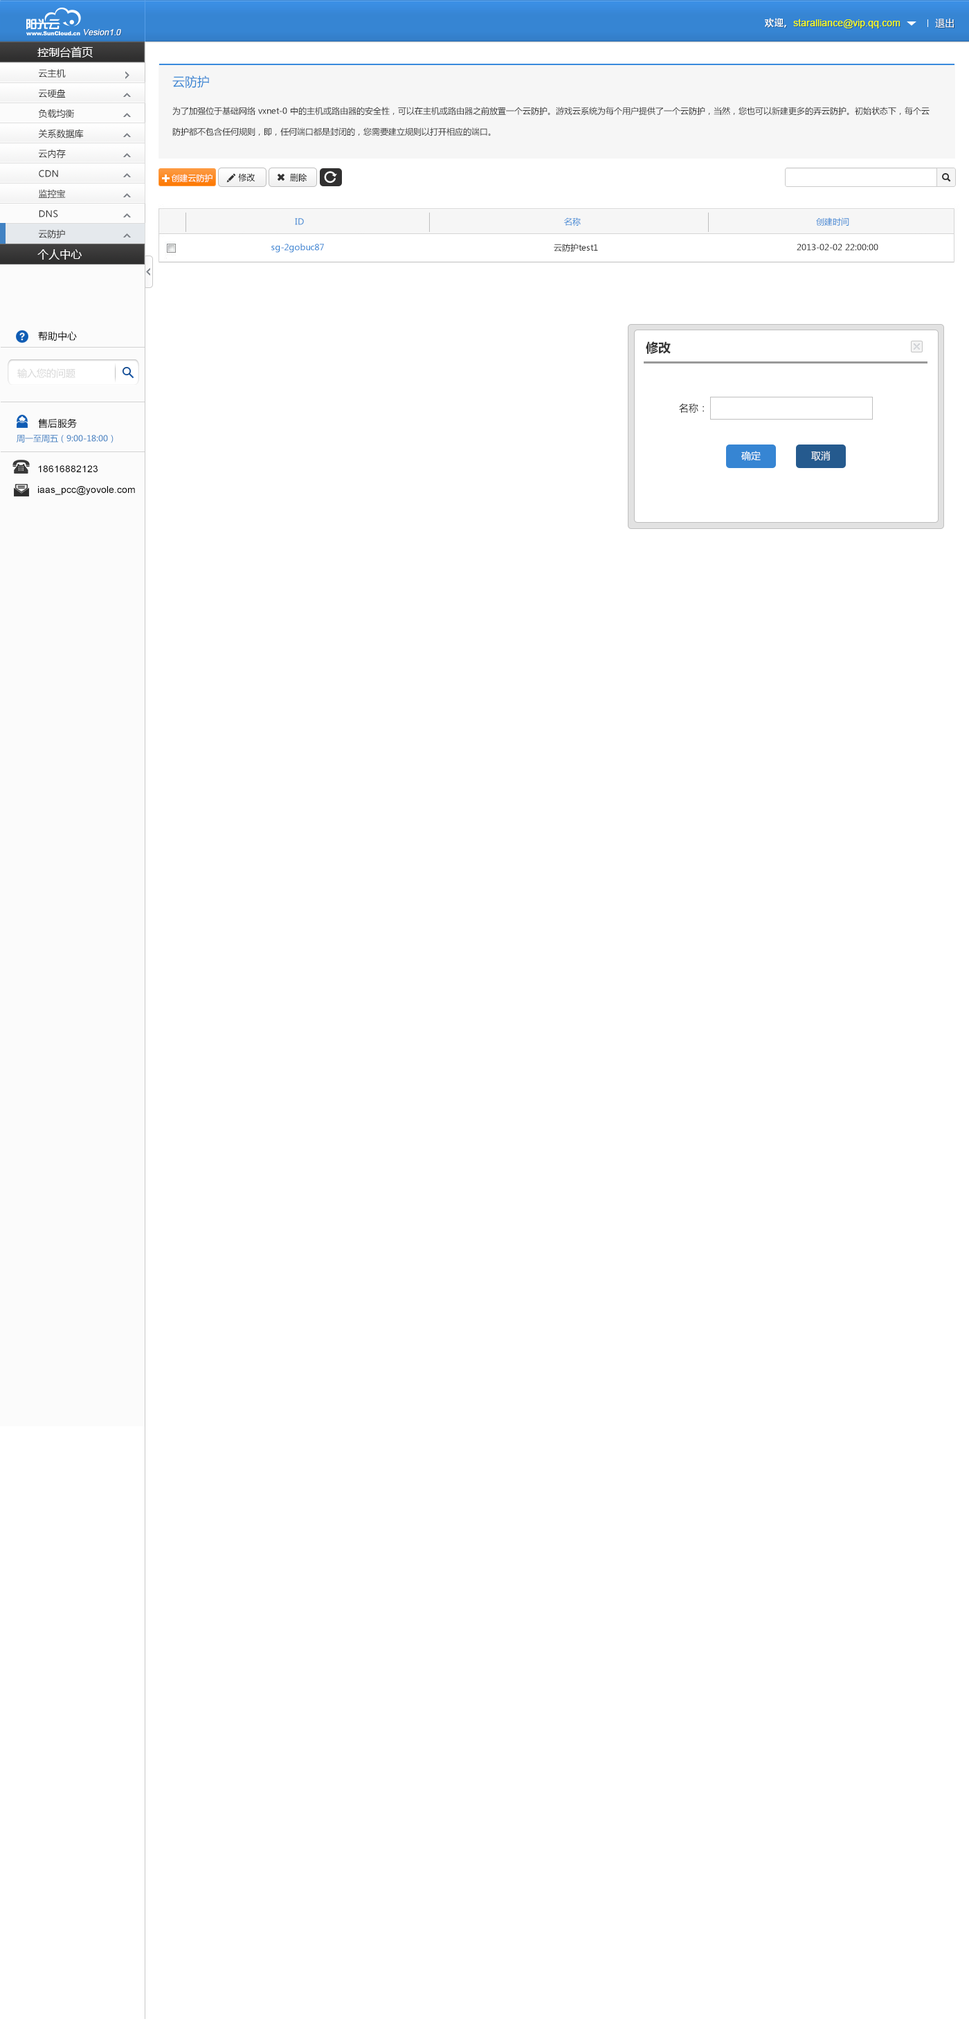
<style>
.page{position:relative;width:969px;height:2037px;background:#ffffff}
.page>*{position:absolute;margin:0}
.t1{font:8.3px "ArialMT";color:#ffffff;font-style:italic}
.t2{font:9.7px "ArialMT";color:#fcff0e}
.t3{font:9.7px "AdobeHeitiStd-Regular";color:#ffffff}
.t4{font:9.7px "MicrosoftYaHei";color:#ffffff}
.t5{font:11.1px "MicrosoftYaHei";color:#ffffff}
.t6{font:9px "MicrosoftYaHei";color:#333333}
.t7{font:12.5px "MicrosoftYaHei";color:#3685d3}
.t8{font:8.3px/20.8px "MicrosoftYaHei";color:#333333}
.t9{font:8.3px "MicrosoftYaHei";color:#fefefe}
.t10{font:8.3px "MicrosoftYaHei";color:#000000}
.t11{font:8.3px "MicrosoftYaHei";color:#3685d3}
.t12{font:8.3px "MicrosoftYaHei";color:#333333}
.t13{font:9.7px "MicrosoftYaHei";color:#000000}
.t14{font:12.5px "MicrosoftYaHei-Bold";color:#333333}
.t15{font:9.7px "MicrosoftYaHei";color:#d7d7d7}
.t16{font:9.7px "MicrosoftYaHei";color:#333333}
.t17{font:8.3px "MicrosoftYaHei";color:#4182c3}
.t18{font:9.7px/6.9px "ArialMT";color:#000000}
</style>
<div class="page">
<p class="t1" style="left:84px;top:29px;width:37px;height:6px">Vesion1.0</p>
<p class="t2" style="left:765px;top:18px;width:136px;height:10px"><span class="t3">欢迎，</span>staralliance@vip.qq.com</p>
<p class="t4" style="left:935px;top:18px;width:19px;height:10px">退出</p>
<p class="t5" style="left:37px;top:46px;width:56px;height:12px">控制台首页</p>
<p class="t6" style="left:38px;top:69px;width:28px;height:9px">云主机</p>
<p class="t7" style="left:172px;top:75px;width:37px;height:14px">云防护</p>
<p class="t6" style="left:38px;top:89px;width:28px;height:9px">云硬盘</p>
<p class="t6" style="left:38px;top:109px;width:36px;height:9px">负载均衡</p>
<p class="t8" style="left:172px;top:107px;width:758px;height:29px">为了加强位于基础网络 vxnet-0 中的主机或路由器的安全性，可以在主机或路由器之前放置一个云防护。游戏云系统为每个用户提供了一个云防护，当然，您也可以新建更多的弄云防护。初始状态下，每个云防护都不包含任何规则，即，任何端口都是封闭的，您需要建立规则以打开相应的端口。</p>
<p class="t6" style="left:38px;top:129px;width:46px;height:9px">关系数据库</p>
<p class="t6" style="left:38px;top:149px;width:28px;height:10px">云内存</p>
<p class="t6" style="left:39px;top:170px;width:19px;height:7px">CDN</p>
<p class="t9" style="left:171px;top:174px;width:42px;height:9px">创建云防护</p>
<p class="t10" style="left:238px;top:173px;width:17px;height:9px">修改</p>
<p class="t10" style="left:290px;top:173px;width:17px;height:9px">删除</p>
<p class="t6" style="left:38px;top:189px;width:28px;height:9px">监控宝</p>
<p class="t6" style="left:39px;top:210px;width:19px;height:7px">DNS</p>
<p class="t11" style="left:295px;top:217px;width:554px;height:9px">ID                                                                                              名称                                                                                     创建时间</p>
<p class="t6" style="left:38px;top:229px;width:27px;height:10px">云防护</p>
<p class="t11" style="left:271px;top:243px;width:53px;height:10px">sg-2gobuc87</p>
<p class="t12" style="left:554px;top:244px;width:44px;height:8px">云防护test1</p>
<p class="t12" style="left:797px;top:244px;width:82px;height:7px">2013-02-02 22:00:00</p>
<p class="t5" style="left:37px;top:249px;width:45px;height:11px">个人中心</p>
<p class="t13" style="left:38px;top:331px;width:39px;height:10px">帮助中心</p>
<p class="t14" style="left:646px;top:341px;width:25px;height:13px">修改</p>
<p class="t15" style="left:17px;top:368px;width:58px;height:10px">输入您的问题</p>
<p class="t16" style="left:679px;top:403px;width:25px;height:10px">名称：</p>
<p class="t13" style="left:38px;top:418px;width:39px;height:11px">售后服务</p>
<p class="t17" style="left:17px;top:435px;width:97px;height:8px">周一至周五（9:00-18:00）</p>
<p class="t4" style="left:741px;top:451px;width:20px;height:10px">确定</p>
<p class="t4" style="left:811px;top:451px;width:20px;height:10px">取消</p>
<p class="t18" style="left:38px;top:465px;width:97px;height:30px">18616882123   <br><br><br>iaas_pcc@yovole.com</p>
</div>
